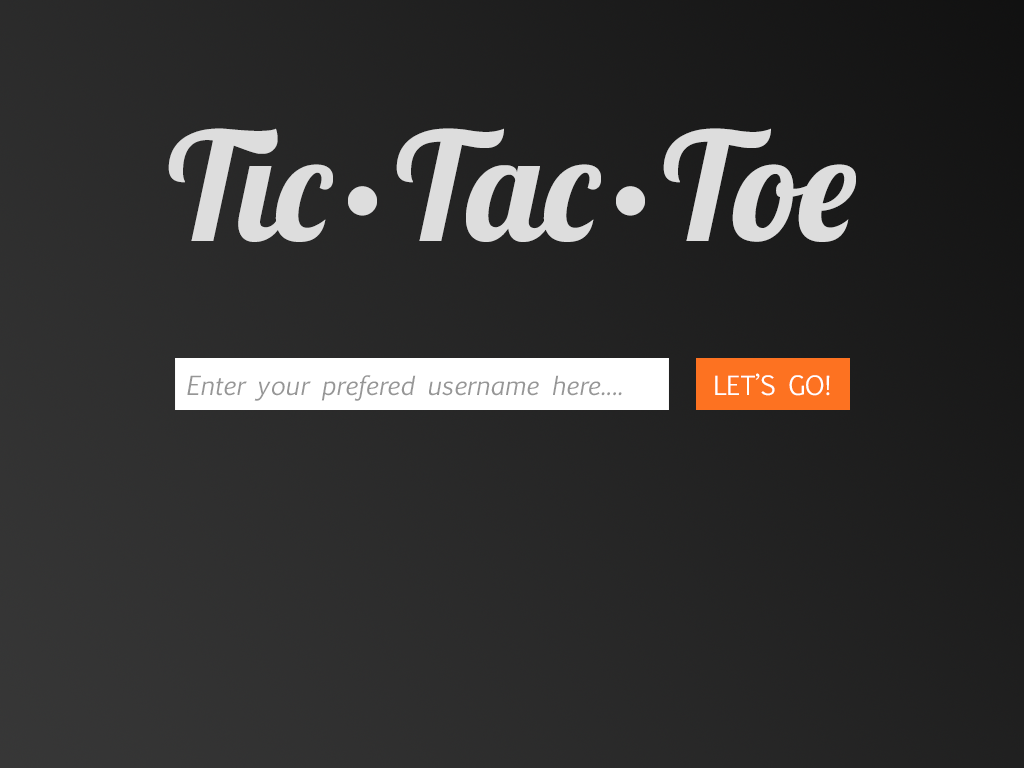
<style>
.page{position:relative;width:1024px;height:768px}
.page>*{position:absolute;margin:0}
.t1{font:150px "Lobster-Regular";color:#dddddd}
.t2{font:25.3px "EuphemiaUCAS-Italic";color:#969696}
.t3{font:25.3px "EuphemiaUCAS";color:#ffffff}
</style>
<div class="page">
<p class="t1" style="left:168px;top:128px;width:688px;height:114px">Tic•Tac•Toe</p>
<p class="t2" style="left:187px;top:375px;width:435px;height:26px">Enter your prefered username here....</p>
<p class="t3" style="left:715px;top:373px;width:115px;height:23px">LET’S GO!</p>
</div>
